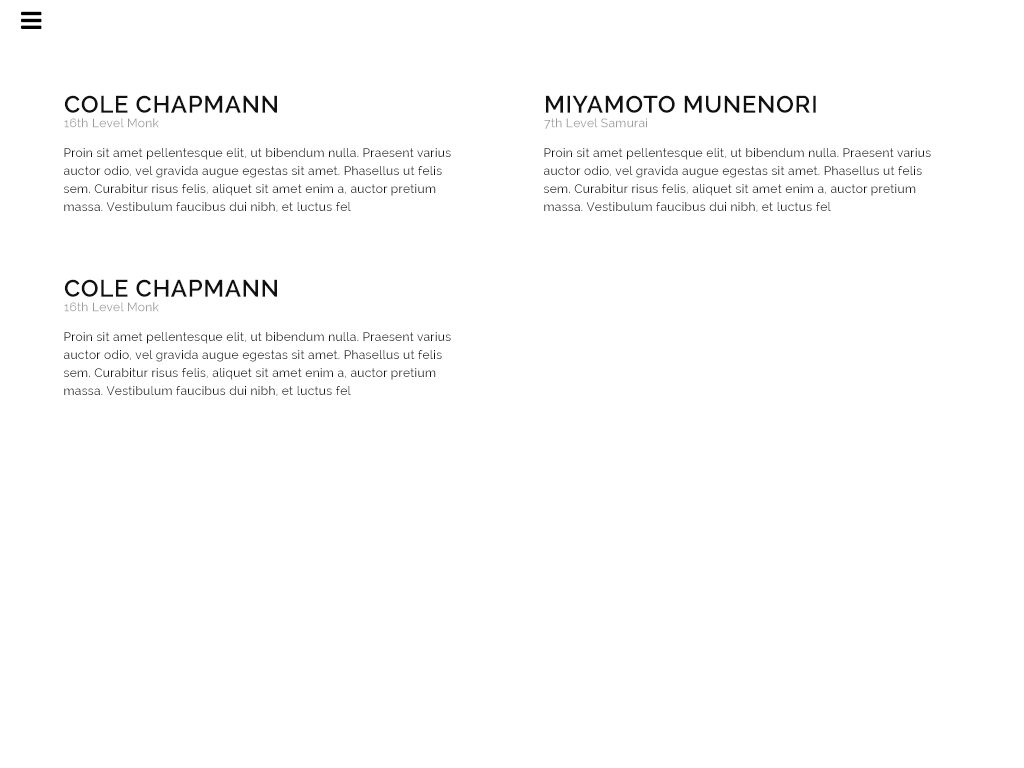
<style>
.page{position:relative;width:1024px;height:768px;background:#ffffff}
.page>*{position:absolute;margin:0}
.t1{font:12px "Raleway";letter-spacing:0.025em;color:#999999}
.t2{font:24px "Raleway-SemiBold";letter-spacing:0.025em;color:#111111;text-transform:uppercase}
.t3{font:12px/18px "Raleway";letter-spacing:0.025em;color:#111111}
</style>
<div class="page">
<p class="t1" style="left:64px;top:95px;width:213px;height:33px"><span class="t2">Cole Chapmann<br></span>16th Level Monk</p>
<p class="t2" style="left:544px;top:95px;width:272px;height:34px">Miyamoto munenori<br><span class="t1">7th Level Samurai</span></p>
<p class="t3" style="left:63px;top:148px;width:388px;height:64px">Proin sit amet pellentesque elit, ut bibendum nulla. Praesent varius auctor odio, vel gravida augue egestas sit amet. Phasellus ut felis<br>sem. Curabitur risus felis, aliquet sit amet enim a, auctor pretium massa. Vestibulum faucibus dui nibh, et luctus fel</p>
<p class="t3" style="left:543px;top:148px;width:388px;height:64px">Proin sit amet pellentesque elit, ut bibendum nulla. Praesent varius auctor odio, vel gravida augue egestas sit amet. Phasellus ut felis<br>sem. Curabitur risus felis, aliquet sit amet enim a, auctor pretium massa. Vestibulum faucibus dui nibh, et luctus fel</p>
<p class="t1" style="left:64px;top:279px;width:213px;height:33px"><span class="t2">Cole Chapmann<br></span>16th Level Monk</p>
<p class="t3" style="left:63px;top:332px;width:388px;height:64px">Proin sit amet pellentesque elit, ut bibendum nulla. Praesent varius auctor odio, vel gravida augue egestas sit amet. Phasellus ut felis<br>sem. Curabitur risus felis, aliquet sit amet enim a, auctor pretium massa. Vestibulum faucibus dui nibh, et luctus fel</p>
</div>
